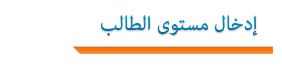
<style>
.page{position:relative;width:282px;height:69px;background:#ffffff}
.page>*{position:absolute;margin:0}
.t1{font:28px "AdobeArabic-Regular";color:#0079ac}
</style>
<div class="page">
<p class="t1" style="left:101px;top:15px;width:157px;height:21px">إدخال مستوى الطالب</p>
</div>
